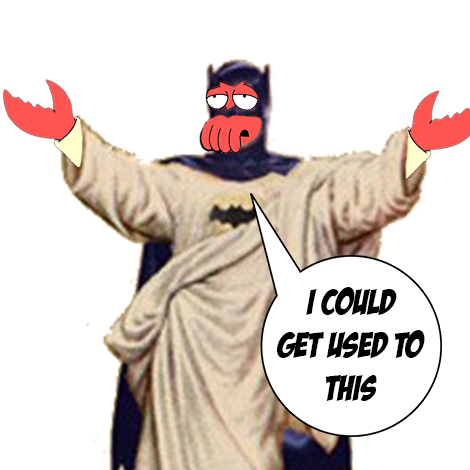
<style>
.page{position:relative;width:470px;height:470px;background:#ffffff}
.page>*{position:absolute;margin:0}
.t1{font:36px "BadaBoomBB";color:#000000}
</style>
<div class="page">
<p class="t1" style="left:276px;top:287px;width:149px;height:114px;text-align:center">i could<br>get used to<br>this</p>
</div>
